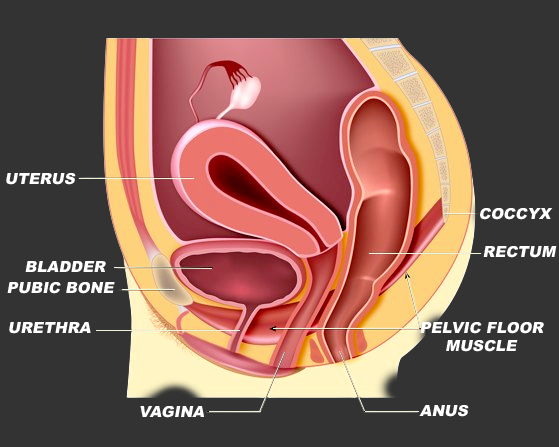
<style>
.page{position:relative;width:559px;height:447px;background:#333333}
.page>*{position:absolute;margin:0}
.t1{font:15.3px "Arial-Black";color:#ffffff;font-style:italic}
</style>
<div class="page">
<p class="t1" style="left:6px;top:173px;width:70px;height:12px">UTERUS</p>
<p class="t1" style="left:480px;top:208px;width:73px;height:12px">COCCYX</p>
<p class="t1" style="left:483px;top:246px;width:74px;height:12px">RECTUM</p>
<p class="t1" style="left:25px;top:261px;width:81px;height:11px">BLADDER</p>
<p class="t1" style="left:7px;top:282px;width:108px;height:12px">PUBIC BONE</p>
<p class="t1" style="left:9px;top:322px;width:82px;height:12px">URETHRA</p>
<p class="t1" style="left:420px;top:322px;width:124px;height:30px">PELVIC FLOOR<br>     MUSCLE</p>
<p class="t1" style="left:140px;top:406px;width:64px;height:12px">VAGINA</p>
<p class="t1" style="left:419px;top:405px;width:50px;height:12px">ANUS</p>
</div>
